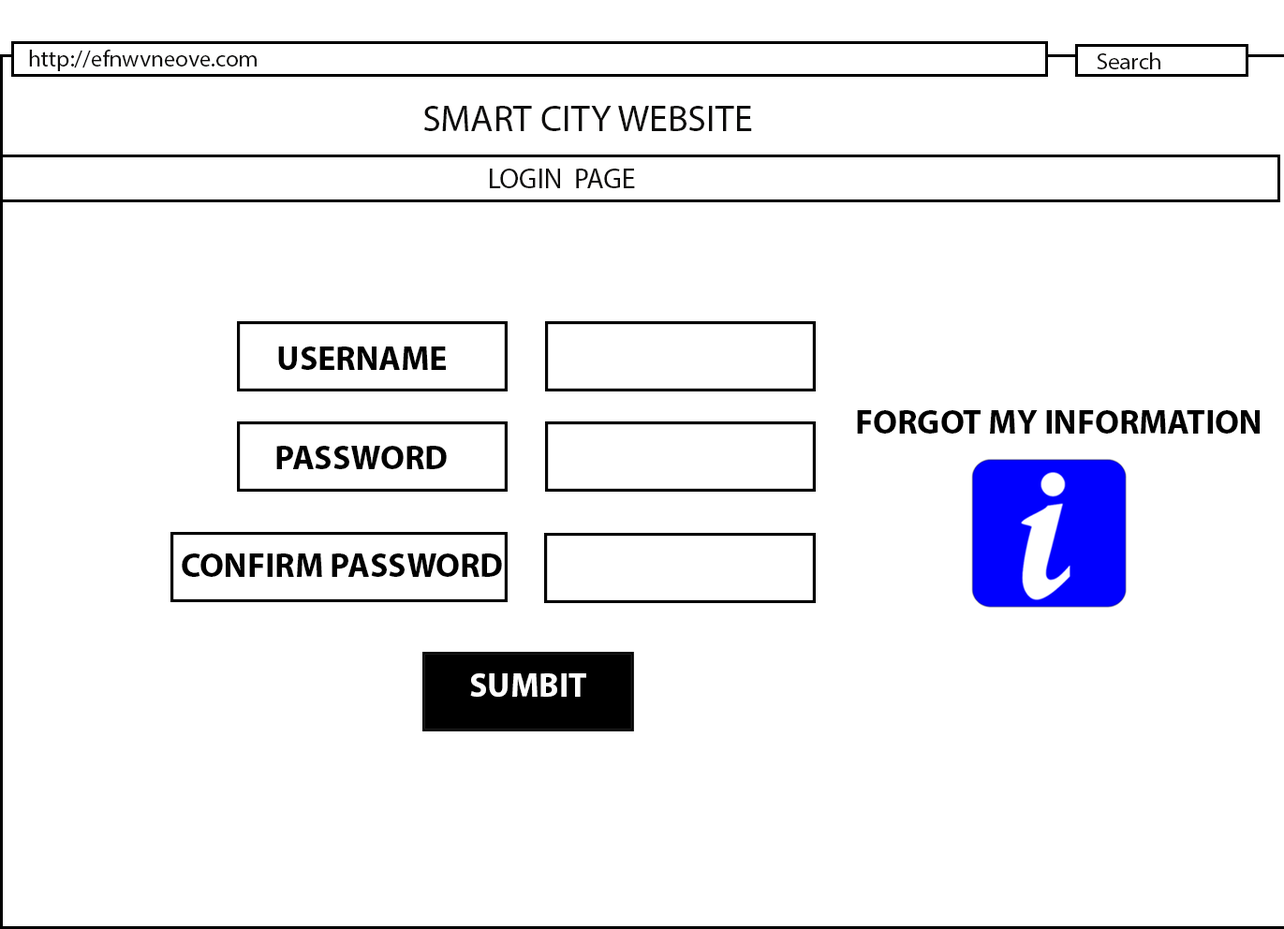
<style>
.page{position:relative;width:1284px;height:929px;background:#ffffff}
.page>*{position:absolute;margin:0}
.t1{font:23.4px "MyriadPro-Regular";color:#0e0d0c}
.t2{font:37.5px "MyriadPro-Regular";color:#0e0d0c}
.t3{font:28.1px "MyriadPro-Regular";color:#0e0d0c}
.t4{font:33.7px "MyriadPro-Bold";color:#000000}
.t5{font:33.7px "MyriadPro-Bold";color:#fdfdfd}
</style>
<div class="page">
<p class="t1" style="left:29px;top:50px;width:228px;height:21px">http://efnwvneove.com</p>
<p class="t1" style="left:1096px;top:52px;width:64px;height:17px">Search</p>
<p class="t2" style="left:424px;top:106px;width:328px;height:25px">SMART CITY WEBSITE</p>
<p class="t3" style="left:490px;top:169px;width:145px;height:19px">LOGIN  PAGE</p>
<p class="t4" style="left:278px;top:346px;width:168px;height:24px">USERNAME</p>
<p class="t4" style="left:857px;top:410px;width:402px;height:24px">FORGOT MY INFORMATION</p>
<p class="t4" style="left:276px;top:446px;width:171px;height:23px">PASSWORD</p>
<p class="t4" style="left:182px;top:553px;width:320px;height:24px">CONFIRM PASSWORD</p>
<p class="t5" style="left:470px;top:673px;width:116px;height:24px">SUMBIT</p>
</div>
